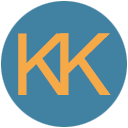
<style>
.page{position:relative;width:128px;height:128px;background:#4181a1}
.page>*{position:absolute;margin:0}
.t1{font:85.6px "Helvetica";color:#f6a947}
.t2{font:85.7px "Helvetica";color:#f6a947}
</style>
<div class="page">
<p class="t1" style="left:18px;top:33px;width:51px;height:62px">K</p>
<p class="t2" style="left:60px;top:33px;width:51px;height:62px">K</p>
</div>
